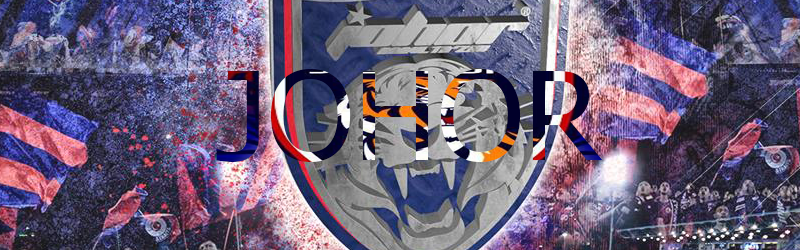
<style>
.page{position:relative;width:800px;height:250px}
.page>*{position:absolute;margin:0}
.t1{font:123px "Tahoma"}
</style>
<div class="page">
<p class="t1" style="left:216px;top:69px;width:387px;height:93px">JOHOR</p>
</div>
